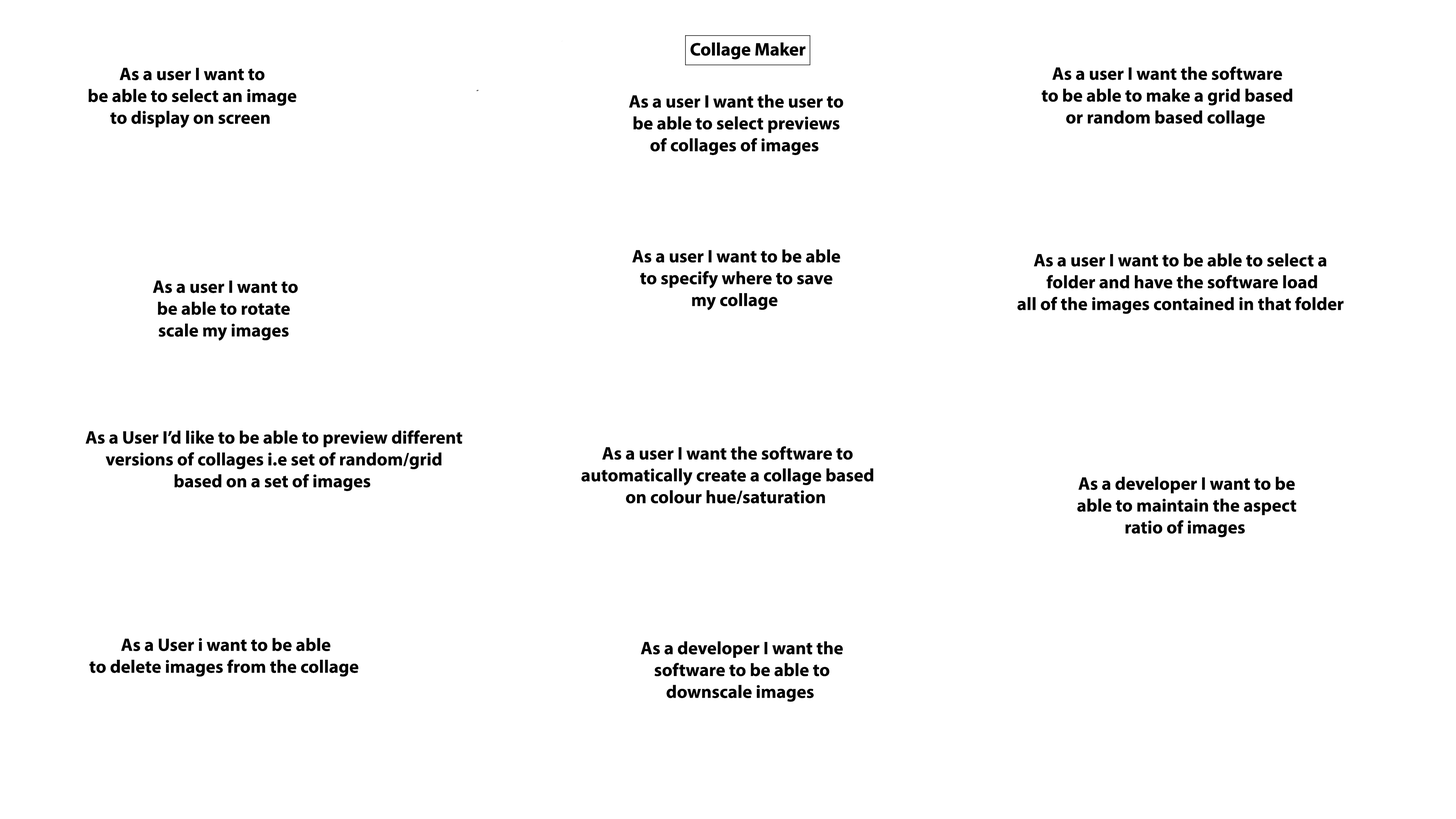
<style>
.page{position:relative;width:1456px;height:819px;background:#ffffff}
.page>*{position:absolute;margin:0}
.t1{font:18.2px "MyriadHebrew-Bold";color:#000000}
</style>
<div class="page">
<p class="t1" style="left:88px;top:67px;width:209px;height:61px;text-align:center">As a user I want to <br>be able to select an image <br>to display on screen</p>
<p class="t1" style="left:1042px;top:66px;width:251px;height:61px;text-align:center">As a user I want the software <br>to be able to make a grid based <br>or random based collage</p>
<p class="t1" style="left:629px;top:94px;width:214px;height:61px;text-align:center">As a user I want the user to <br>be able to select previews <br>of collages of images</p>
<p class="t1" style="left:632px;top:249px;width:208px;height:61px;text-align:center">As a user I want to be able <br>to specify where to save <br>my collage</p>
<p class="t1" style="left:1017px;top:253px;width:327px;height:61px;text-align:center">As a user I want to be able to select a<br>folder and have the software load <br>all of the images contained in that folder</p>
<p class="t1" style="left:153px;top:280px;width:145px;height:61px;text-align:center">As a user I want to <br>be able to rotate<br>scale my images</p>
<p class="t1" style="left:85px;top:430px;width:377px;height:61px;text-align:center">As a User I’d like to be able to preview different <br>versions of collages i.e set of random/grid <br>based on a set of images</p>
<p class="t1" style="left:581px;top:446px;width:292px;height:58px;text-align:center">As a user I want the software to <br>automatically create a collage based <br>on colour hue/saturation</p>
<p class="t1" style="left:1077px;top:477px;width:219px;height:60px;text-align:center">As a developer I want to be <br>able to maintain the aspect <br>ratio of images</p>
<p class="t1" style="left:89px;top:638px;width:269px;height:39px;text-align:center">As a User i want to be able <br>to delete images from the collage</p>
<p class="t1" style="left:641px;top:641px;width:202px;height:61px;text-align:center">As a developer I want the <br>software to be able to <br>downscale images</p>
</div>
